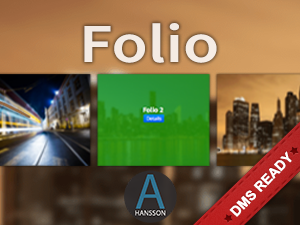
<style>
.page{position:relative;width:300px;height:225px}
.page>*{position:absolute;margin:0}
.t1{font:55px "SourceSansPro-Semibold";color:#f4ebe4;scale:1.2 1}
.t2{font:13.8px "Arial-BoldMT";color:#ffffff;text-transform:uppercase}
</style>
<div class="page">
<p class="t1" style="left:84px;top:23px;width:133px;height:40px">Folio</p>
<p class="t2" style="left:229px;top:151px;width:63px;height:66px;rotate:-46deg">DMS Ready</p>
</div>
